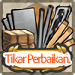
<style>
.page{position:relative;width:75px;height:75px}
.page>*{position:absolute;margin:0}
.t1{font:12.7px "AdobeClean-SemiCn";letter-spacing:-0.08em;color:#ff5a00}
</style>
<div class="page">
<p class="t1" style="left:4px;top:53px;width:67px;height:11px">Tikar Perbaikan.</p>
</div>
